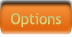
<style>
.page{position:relative;width:72px;height:37px}
.page>*{position:absolute;margin:0}
.t1{font:15px "TrebuchetMS";color:#cfcc79}
</style>
<div class="page">
<p class="t1" style="left:11px;top:13px;width:51px;height:15px">Options</p>
</div>
